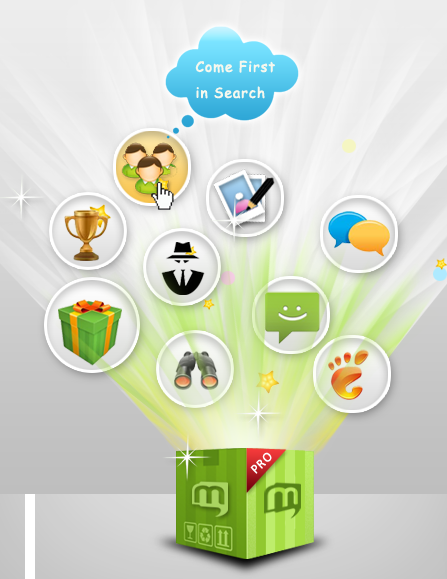
<style>
.page{position:relative;width:447px;height:579px}
.page>*{position:absolute;margin:0}
.t1{font:14px/26px "ComicSansMS";letter-spacing:0.04em;color:#f5f8ee;font-weight:bold}
.t2{font:13px "Calibri";letter-spacing:0.04em;color:#ffffff;font-weight:bold}
</style>
<div class="page">
<p class="t1" style="left:195px;top:60px;width:80px;height:39px">Come First in Search</p>
<p class="t2" style="left:250px;top:452px;width:22px;height:22px;rotate:-44deg">PRO</p>
</div>
